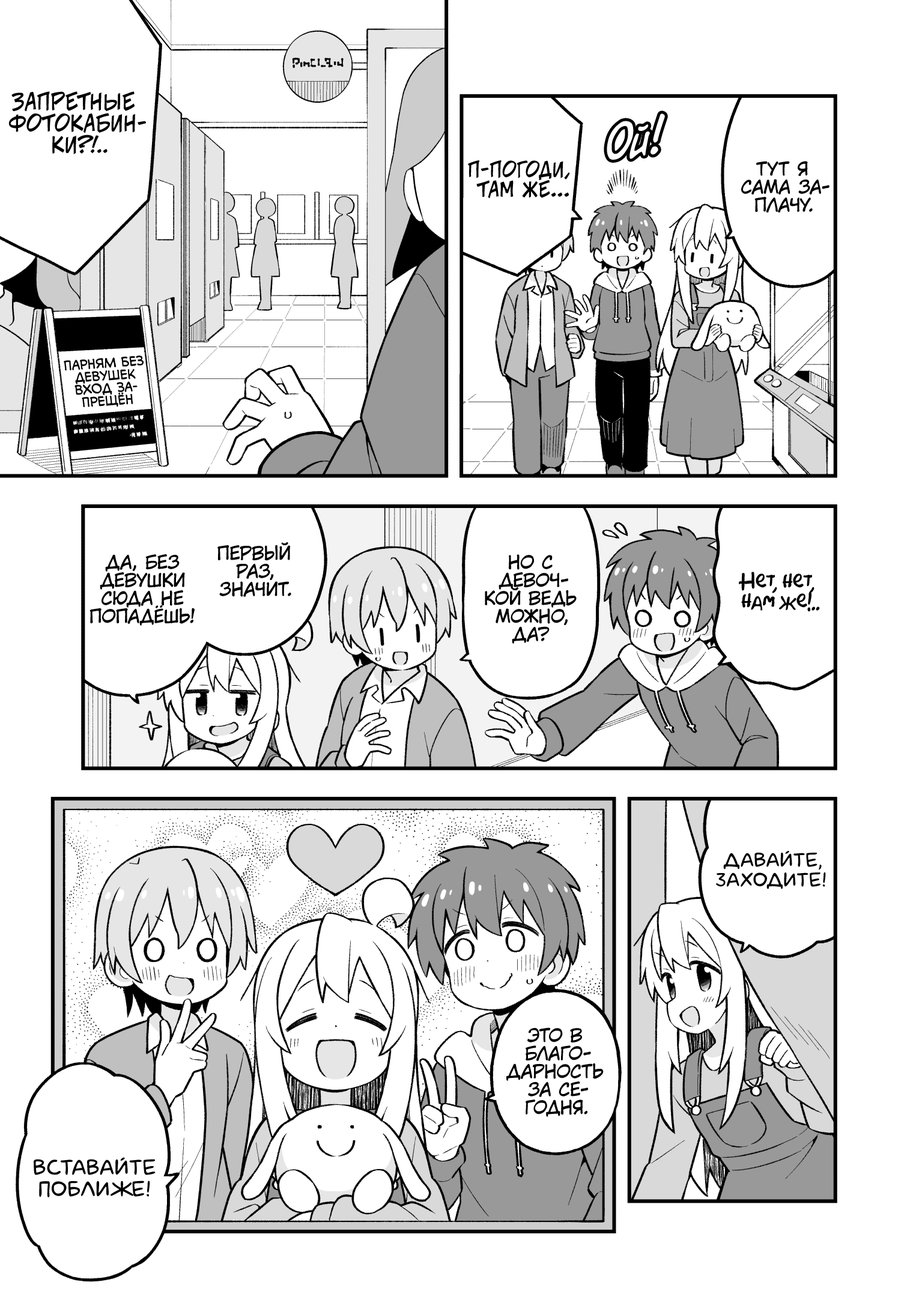
<style>
.page{position:relative;width:919px;height:1297px;background:#ffffff}
.page>*{position:absolute;margin:0}
.t1{font:21.6px "v_CCJeffCampbell";color:#000000;text-transform:uppercase}
.t2{font:18px "v_CCJeffCampbell";color:#000000;text-transform:uppercase}
.t3{font:45.1px "v_CCDearDiary";color:#ffffff}
.t4{font:19.8px "v_CCJeffCampbell";color:#000000;text-transform:uppercase}
.t5{font:18px "KuraiVoice2";color:#000000;text-transform:uppercase}
.t6{font:12.6px "v_CCMonologous";color:#000000;text-transform:uppercase}
.t7{font:19.8px "AkbarPlain";color:#000000}
.t8{font:19.8px "laCartoonerie";color:#000000;text-transform:uppercase}
.t9{font:21.6px "laCartoonerie";color:#000000;text-transform:uppercase}
</style>
<div class="page">
<p class="t1" style="left:8px;top:91px;width:139px;height:63px;text-align:center">Запретные<br>фотокабин-<br>ки?!<span class="t2">..</span></p>
<p class="t3" style="left:607px;top:114px;width:58px;height:46px;rotate:-7deg">Ой!</p>
<p class="t4" style="left:468px;top:160px;width:102px;height:38px;text-align:center">П-погоди,<br>там же...</p>
<p class="t5" style="left:741px;top:161px;width:89px;height:52px;text-align:center">Тут Я<br>сама за-<br>плачу.</p>
<p class="t6" style="left:64px;top:356px;width:80px;height:51px;text-align:center;rotate:-4deg">Парням без<br>девушек<br>вход за-<br>прещён</p>
<p class="t5" style="left:217px;top:542px;width:74px;height:55px;text-align:center">Первый<br>раз,<br>значит.</p>
<p class="t5" style="left:90px;top:554px;width:105px;height:72px;text-align:center">Да, без<br>девушки<br>сюда не<br>попадёшь!</p>
<p class="t5" style="left:485px;top:554px;width:92px;height:90px;text-align:center">Но с<br>девоч-<br>кой ведь<br>можно,<br>да?</p>
<p class="t7" style="left:739px;top:572px;width:81px;height:40px;text-align:center">Нет, нет,<br>нам же!..</p>
<p class="t8" style="left:716px;top:851px;width:110px;height:39px;text-align:center">Давайте,<br>заходите!</p>
<p class="t5" style="left:506px;top:1028px;width:98px;height:89px;text-align:center">Это в<br>благо-<br>дарность<br>за се-<br>годня.</p>
<p class="t9" style="left:34px;top:1158px;width:122px;height:40px;text-align:center">Вставайте<br>поближе!</p>
</div>
